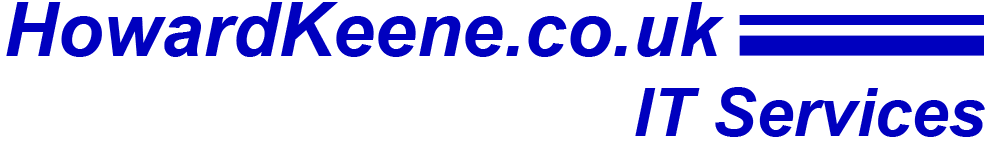
<style>
.page{position:relative;width:1000px;height:150px;background:#ffffff}
.page>*{position:absolute;margin:0}
.t1{font:75px "Arial-BoldItalicMT";color:#0000bf}
.t2{font:66.7px "Arial-BoldItalicMT";color:#0000bf}
</style>
<div class="page">
<p class="t1" style="left:6px;top:2px;width:718px;height:55px">HowardKeene.co.uk</p>
<p class="t2" style="left:635px;top:87px;width:350px;height:50px">IT Services</p>
</div>
